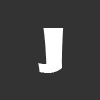
<style>
.page{position:relative;width:100px;height:100px;background:#333333}
.page>*{position:absolute;margin:0}
.t1{font:58.3px "ShowcardGothic-Reg";color:#ffffff}
</style>
<div class="page">
<p class="t1" style="left:38px;top:28px;width:26px;height:45px">j</p>
</div>
